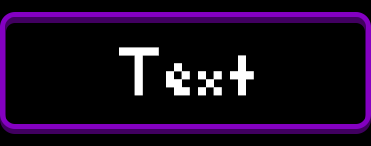
<style>
.page{position:relative;width:371px;height:146px;background:#000000}
.page>*{position:absolute;margin:0}
.t1{font:63.5px "PixelGaming";color:#ffffff}
</style>
<div class="page">
<p class="t1" style="left:119px;top:47px;width:135px;height:49px">Text</p>
</div>
